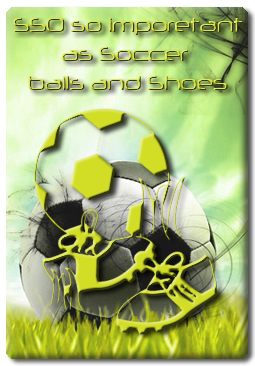
<style>
.page{position:relative;width:255px;height:366px}
.page>*{position:absolute;margin:0}
.t1{font:24px "Neuropol";letter-spacing:-0.025em}
</style>
<div class="page">
<p class="t1" style="left:13px;top:18px;width:230px;height:72px;text-align:center">SSO so imporetant<br>as Soccer <br>balls and Shoes</p>
</div>
